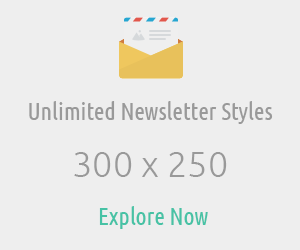
<style>
.page{position:relative;width:300px;height:250px;background:#eeeeee}
.page>*{position:absolute;margin:0}
.t1{font:24px "UbuntuCondensed-Regular";color:#999999}
.t2{font:36px "Ubuntu-Light";color:#999999}
.t3{font:24px "UbuntuCondensed-Regular";color:#47c2a5}
</style>
<div class="page">
<p class="t1" style="left:29px;top:101px;width:244px;height:23px">Unlimited Newsletter Styles</p>
<p class="t2" style="left:74px;top:152px;width:153px;height:25px">300 x 250</p>
<p class="t3" style="left:99px;top:206px;width:109px;height:23px">Explore Now</p>
</div>
